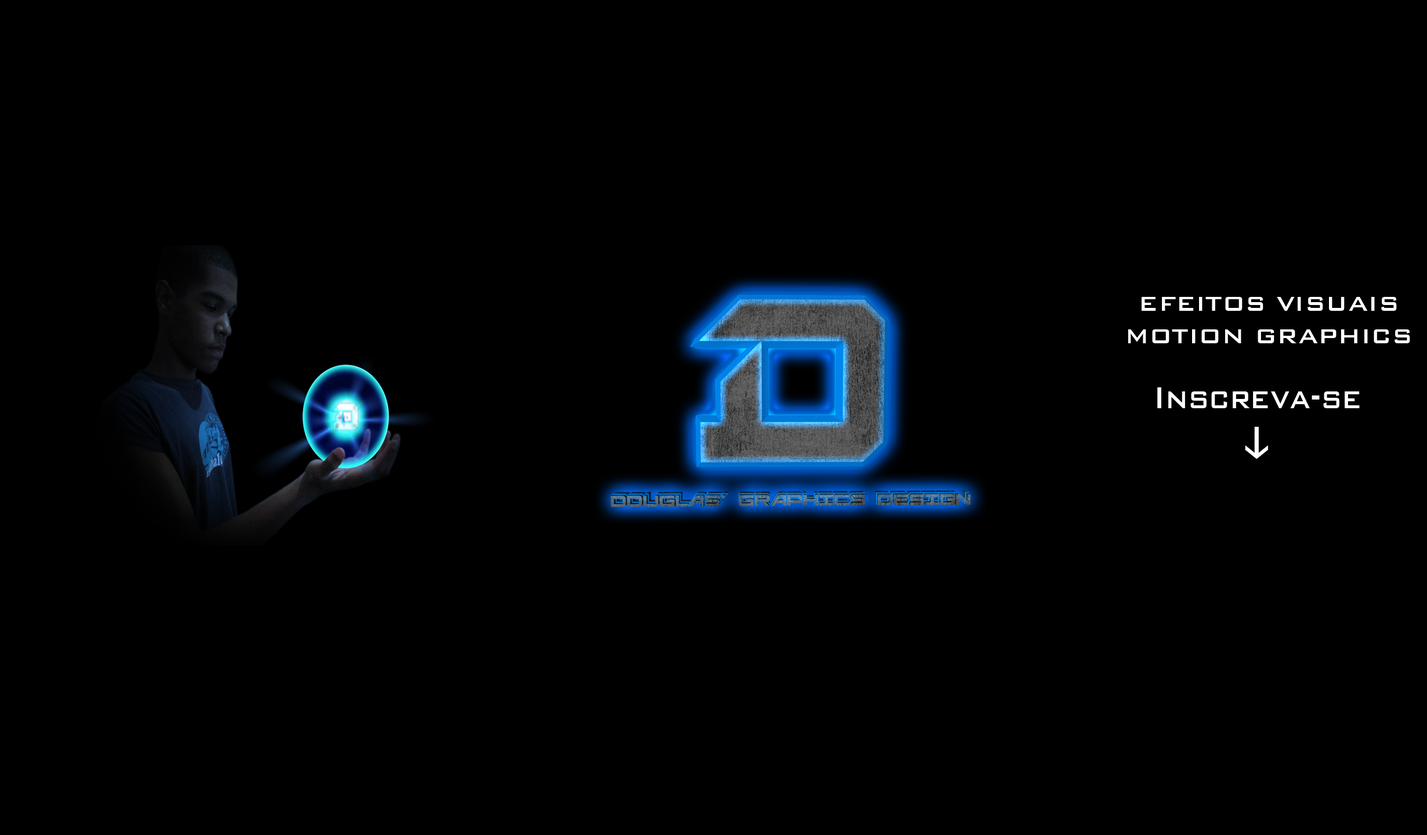
<style>
.page{position:relative;width:1427px;height:835px;background:#000000}
.page>*{position:absolute;margin:0}
.t1{font:27.1px "BankGothicBT-Medium";color:#ffffff;scale:0.97 1}
.t2{font:40px "BankGothicBT-Medium";color:#ffffff;scale:0.8 1}
</style>
<div class="page">
<p class="t1" style="left:1128px;top:297px;width:282px;height:46px;text-align:center">EFEITOS VISUAIS<br>MOTION GRAPHICS</p>
<p class="t2" style="left:1157px;top:388px;width:203px;height:20px">Inscreva-se</p>
</div>
